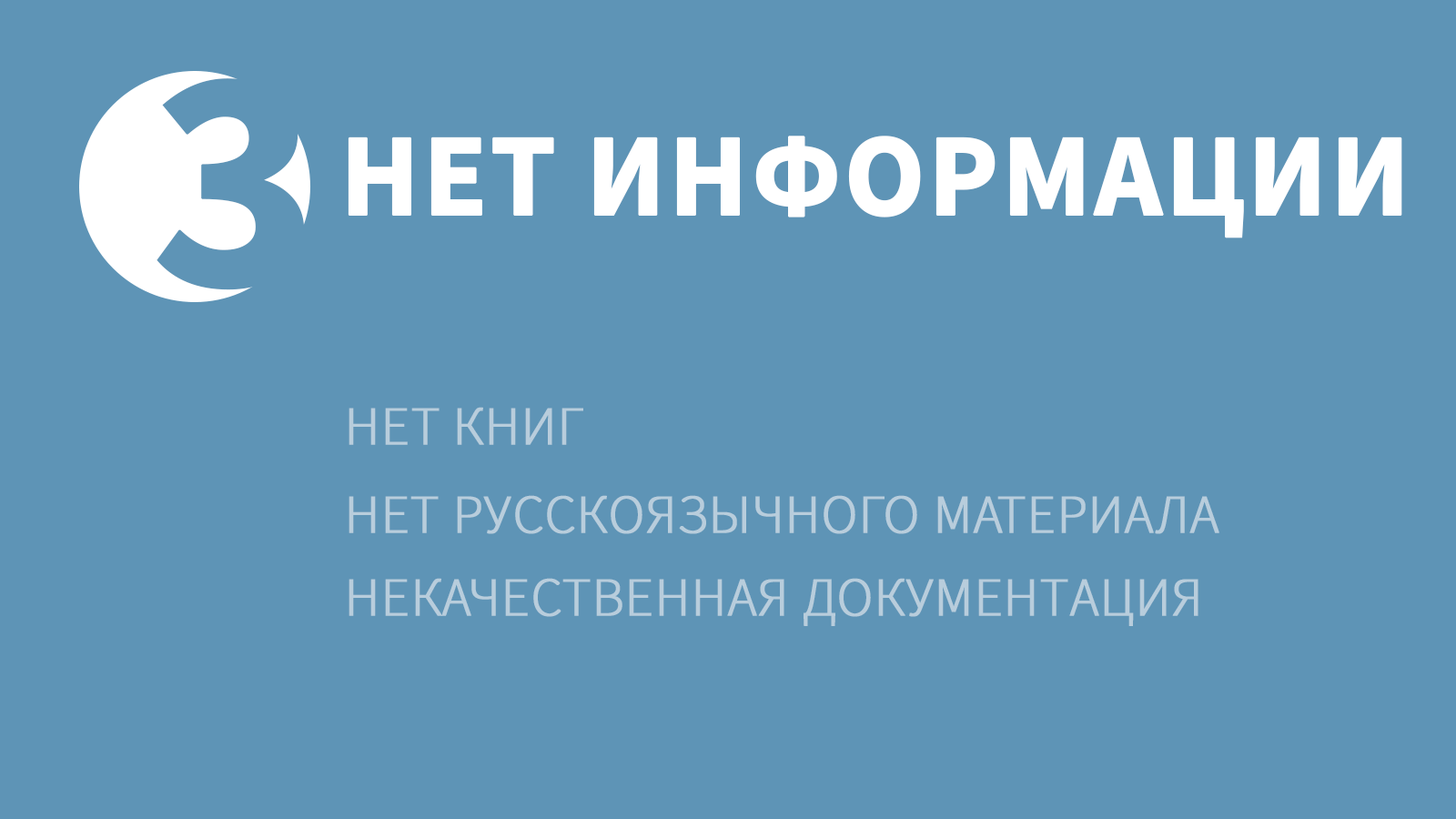
<style>
.page{position:relative;width:1456px;height:819px;background:#5e94b6}
.page>*{position:absolute;margin:0}
.t1{font:317.8px "SourceSansPro-Bold";color:#5e94b6;text-transform:uppercase;font-weight:bold}
.t2{font:117.8px "SourceSansPro-Bold";color:#ffffff;text-transform:uppercase;font-weight:bold}
.t3{font:54.6px "SourceSansPro-Light";color:#b8cddc;text-transform:uppercase;font-weight:bold}
</style>
<div class="page">
<p class="t1" style="left:157px;top:78px;width:148px;height:212px">3</p>
<p class="t2" style="left:348px;top:136px;width:1054px;height:102px">нет информации</p>
<p class="t3" style="left:349px;top:407px;width:234px;height:38px">нет книг</p>
<p class="t3" style="left:349px;top:495px;width:870px;height:39px">Нет русскоязычного материала</p>
<p class="t3" style="left:349px;top:578px;width:849px;height:48px">Некачественная документация</p>
</div>
